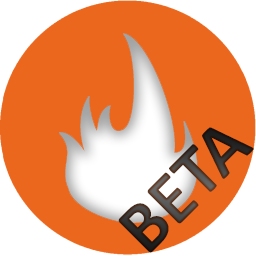
<style>
.page{position:relative;width:256px;height:256px;background:#eb671d}
.page>*{position:absolute;margin:0}
.t1{font:74px "Calibri-Bold"}
</style>
<div class="page">
<p class="t1" style="left:118px;top:127px;width:136px;height:126px;rotate:-45deg">BETA</p>
</div>
